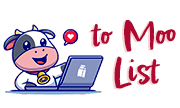
<style>
.page{position:relative;width:180px;height:108px;background:#ffffff}
.page>*{position:absolute;margin:0}
.t1{font:34.1px/36.8px "EpicursiveScript-Regular";color:#b40d30;font-weight:bold}
.t2{font:31px/36.8px "EpicursiveScript-Regular";color:#b40d30;font-weight:bold}
</style>
<div class="page">
<p class="t1" style="left:90px;top:20px;width:86px;height:69px"><span class="t2">to </span>Moo<br>  List</p>
</div>
